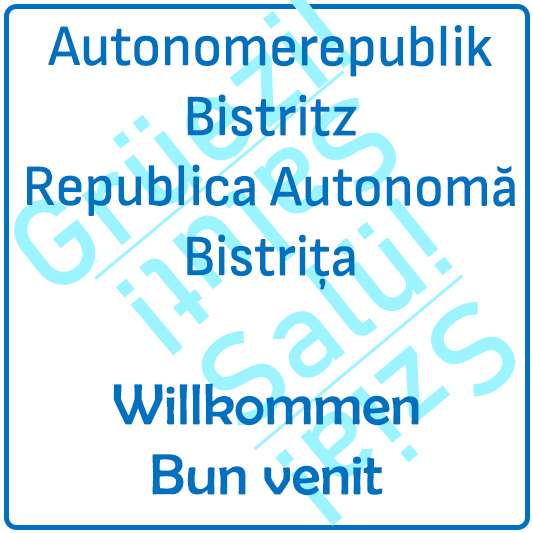
<style>
.page{position:relative;width:533px;height:533px;background:#ffffff}
.page>*{position:absolute;margin:0}
.t1{font:58.3px "SofiaSans-Medium";color:#0070c0;scale:0.95 1}
.t2{font:125px "Bahnschrift";color:#9bf4ff;text-decoration:underline}
.t3{font:58.3px "BerlinSansFB-Reg";color:#0070c0}
</style>
<div class="page">
<p class="t1" style="left:27px;top:25px;width:488px;height:265px;text-align:center">Autonomerepublik Bistritz<br>Republica Autonomă Bistrița</p>
<p class="t2" style="left:253px;top:274px;width:262px;height:252px;rotate:140deg">Szia!</p>
<p class="t3" style="left:113px;top:383px;width:306px;height:113px;text-align:center">Willkommen<br>Bun venit</p>
</div>
